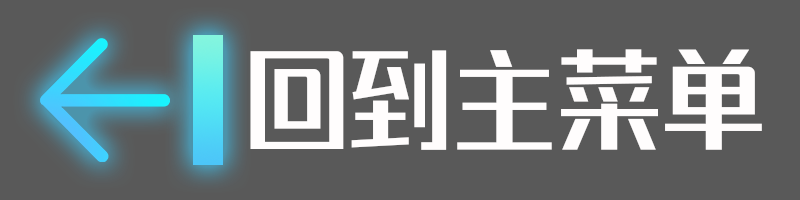
<style>
.page{position:relative;width:800px;height:200px;background:#595959}
.page>*{position:absolute;margin:0}
.t1{font:104.2px "REEJIZhenyanGB20GX-Medium";color:#fffdfd}
</style>
<div class="page">
<p class="t1" style="left:250px;top:49px;width:512px;height:101px">回到主菜单</p>
</div>
